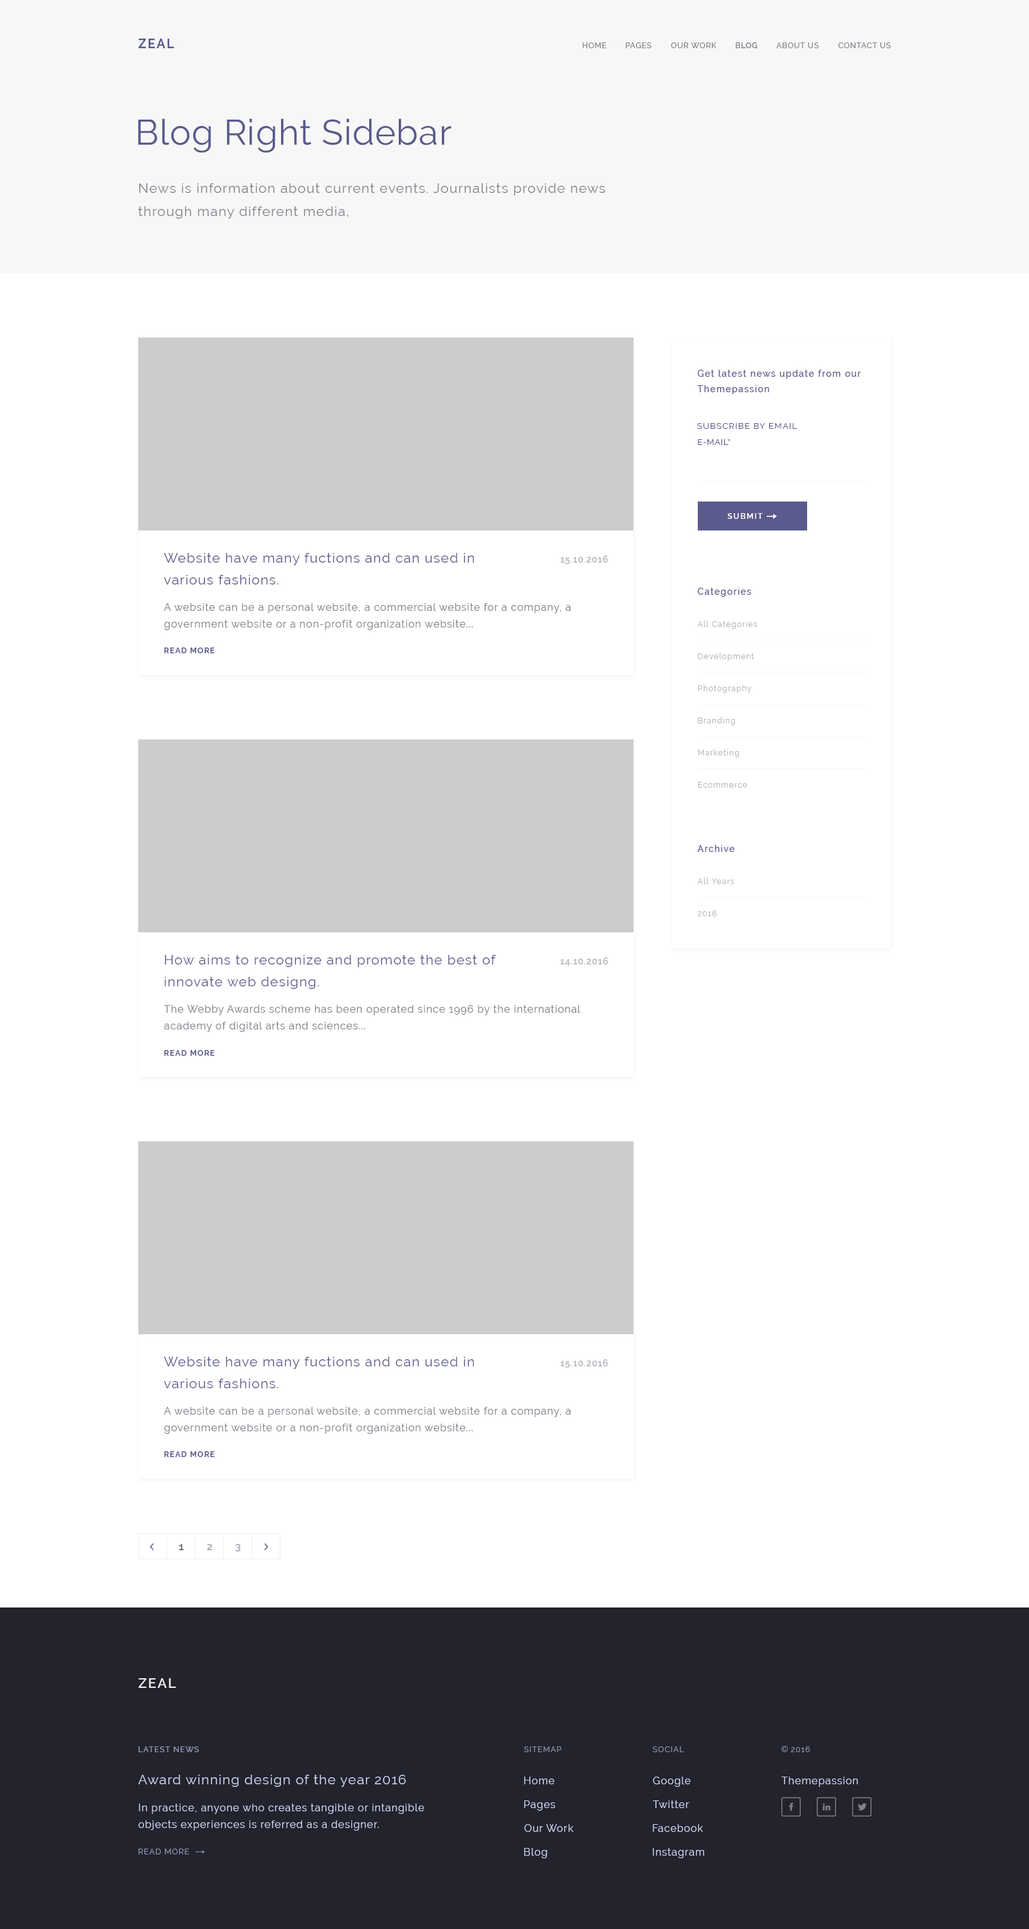
<style>
.page{position:relative;width:1029px;height:1929px;background:#ffffff}
.page>*{position:absolute;margin:0}
.t1{font:12.9px "Raleway-Bold";letter-spacing:0.1em;color:#5a5a8c}
.t2{font:7.7px "Raleway-Medium";letter-spacing:0.06em;color:#82828c}
.t3{font:7.7px "Raleway-SemiBold";letter-spacing:0.06em;color:#82828c}
.t4{font:35.4px "Raleway-Regular";letter-spacing:0.02em;color:#5a5a8c}
.t5{font:13.5px/23.1px "Raleway-Regular";letter-spacing:0.06em;color:#82828c}
.t6{font:9px/15.4px "Raleway-Medium";letter-spacing:0.1em;color:#5a5a8c}
.t7{font:8.4px "Raleway-Regular";letter-spacing:0.1em;color:#5a5a8c}
.t8{font:8.4px "Raleway-Regular";letter-spacing:0.06em;color:#5a5a8c}
.t9{font:7.7px "Raleway-SemiBold";letter-spacing:0.15em;color:#ffffff}
.t10{font:13.5px/21.9px "Raleway-Regular";letter-spacing:0.06em;color:#5a5a8c}
.t11{font:9px "Raleway-SemiBold";letter-spacing:0.06em;color:#b3b3bc}
.t12{font:9px "Raleway-Medium";letter-spacing:0.1em;color:#5a5a8c}
.t13{font:10.3px/16.7px "Raleway-Regular";letter-spacing:0.06em;color:#82828c}
.t14{font:7.7px "Raleway-Regular";letter-spacing:0.1em;color:#b3b3bc}
.t15{font:7.7px "Raleway-Bold";letter-spacing:0.1em;color:#5a5a8c}
.t16{font:10.3px "Raleway-Bold";color:#757575}
.t17{font:10.3px "Raleway-Bold";color:#b3b3bc}
.t18{font:13.5px "Raleway-SemiBold";letter-spacing:0.1em;color:#eeeeee}
.t19{font:7.7px "Raleway-Medium";letter-spacing:0.1em;color:#9797b8}
.t20{font:7.7px "Raleway-Regular";letter-spacing:0.1em;color:#9797b8}
.t21{font:13.5px "Raleway-Regular";letter-spacing:0.06em;color:#d0d0f0}
.t22{font:10.3px "Raleway-Regular";letter-spacing:0.06em;color:#d0d0f0}
.t23{font:10.3px/16.7px "Raleway-Regular";letter-spacing:0.06em;color:#d0d0f0}
</style>
<div class="page">
<p class="t1" style="left:138px;top:39px;width:36px;height:9px">ZEAL</p>
<p class="t2" style="left:582px;top:42px;width:24px;height:6px">HOME</p>
<p class="t2" style="left:626px;top:42px;width:25px;height:6px">PAGES</p>
<p class="t2" style="left:670px;top:42px;width:46px;height:6px">OUR WORK</p>
<p class="t3" style="left:735px;top:42px;width:22px;height:6px">BLOG</p>
<p class="t2" style="left:776px;top:42px;width:42px;height:6px">ABOUT US</p>
<p class="t2" style="left:838px;top:42px;width:52px;height:6px">CONTACT US</p>
<p class="t4" style="left:138px;top:118px;width:313px;height:35px">Blog Right Sidebar</p>
<p class="t5" style="left:138px;top:183px;width:467px;height:36px;text-align:right">News is information about current events. Journalists provide news<br>through many different media,</p>
<p class="t6" style="left:697px;top:370px;width:164px;height:24px;text-align:right">Get latest news update from our<br>Themepassion</p>
<p class="t7" style="left:697px;top:423px;width:100px;height:6px">SUBSCRIBE BY EMAIL</p>
<p class="t8" style="left:698px;top:439px;width:32px;height:6px">E-MAIL*</p>
<p class="t9" style="left:727px;top:513px;width:35px;height:6px">SUBMIT</p>
<p class="t10" style="left:164px;top:553px;width:310px;height:31px;text-align:right">Website have many fuctions and can used in<br>various fashions.</p>
<p class="t11" style="left:560px;top:555px;width:48px;height:9px">15.10.2016</p>
<p class="t12" style="left:697px;top:588px;width:54px;height:9px">Categories</p>
<p class="t13" style="left:164px;top:603px;width:407px;height:27px;text-align:right">A website can be a personal website, a commercial website for a company, a<br>government website or a non-profit organization website...</p>
<p class="t14" style="left:697px;top:620px;width:60px;height:9px">All Categories</p>
<p class="t15" style="left:164px;top:647px;width:51px;height:6px">READ MORE</p>
<p class="t14" style="left:698px;top:652px;width:56px;height:9px">Development</p>
<p class="t14" style="left:698px;top:685px;width:54px;height:8px">Photography</p>
<p class="t14" style="left:698px;top:717px;width:37px;height:8px">Branding</p>
<p class="t14" style="left:698px;top:749px;width:41px;height:8px">Marketing</p>
<p class="t14" style="left:698px;top:782px;width:49px;height:6px">Ecommerce</p>
<p class="t12" style="left:697px;top:845px;width:37px;height:7px">Archive</p>
<p class="t14" style="left:697px;top:878px;width:37px;height:6px">All Years</p>
<p class="t14" style="left:698px;top:910px;width:19px;height:6px">2016</p>
<p class="t10" style="left:165px;top:955px;width:331px;height:34px;text-align:right">How aims to recognize and promote the best of<br>innovate web designg.</p>
<p class="t11" style="left:560px;top:957px;width:48px;height:9px">14.10.2016</p>
<p class="t13" style="left:164px;top:1005px;width:416px;height:27px;text-align:right">The Webby Awards scheme has been operated since 1996 by the international<br>academy of digital arts and sciences...</p>
<p class="t15" style="left:164px;top:1050px;width:51px;height:6px">READ MORE</p>
<p class="t10" style="left:164px;top:1356px;width:310px;height:32px;text-align:right">Website have many fuctions and can used in<br>various fashions.</p>
<p class="t11" style="left:560px;top:1359px;width:48px;height:9px">15.10.2016</p>
<p class="t13" style="left:164px;top:1407px;width:407px;height:27px;text-align:right">A website can be a personal website, a commercial website for a company, a<br>government website or a non-profit organization website...</p>
<p class="t15" style="left:164px;top:1451px;width:51px;height:6px">READ MORE</p>
<p class="t16" style="left:179px;top:1544px;width:5px;height:6px">1</p>
<p class="t17" style="left:207px;top:1544px;width:5px;height:6px">2</p>
<p class="t17" style="left:235px;top:1544px;width:5px;height:7px">3</p>
<p class="t18" style="left:138px;top:1678px;width:38px;height:10px">ZEAL</p>
<p class="t19" style="left:138px;top:1746px;width:61px;height:6px">LATEST NEWS</p>
<p class="t20" style="left:524px;top:1746px;width:37px;height:6px">SITEMAP</p>
<p class="t20" style="left:652px;top:1746px;width:32px;height:6px">SOCIAL</p>
<p class="t20" style="left:791px;top:1746px;width:19px;height:6px">2016</p>
<p class="t21" style="left:138px;top:1774px;width:268px;height:13px">Award winning design of the year 2016</p>
<p class="t22" style="left:524px;top:1776px;width:30px;height:8px">Home</p>
<p class="t22" style="left:652px;top:1776px;width:38px;height:11px">Google</p>
<p class="t22" style="left:781px;top:1776px;width:77px;height:11px">Themepassion</p>
<p class="t23" style="left:138px;top:1803px;width:286px;height:27px;text-align:right">In practice, anyone who creates tangible or intangible<br>objects experiences is referred as a designer.</p>
<p class="t22" style="left:524px;top:1800px;width:31px;height:10px">Pages</p>
<p class="t22" style="left:652px;top:1800px;width:37px;height:8px">Twitter</p>
<p class="t22" style="left:524px;top:1824px;width:49px;height:8px">Our Work</p>
<p class="t22" style="left:652px;top:1824px;width:51px;height:8px">Facebook</p>
<p class="t20" style="left:138px;top:1848px;width:51px;height:6px">READ MORE</p>
<p class="t22" style="left:524px;top:1848px;width:23px;height:10px">Blog</p>
<p class="t22" style="left:652px;top:1848px;width:52px;height:10px">Instagram</p>
</div>
